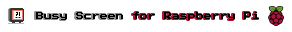
<style>
.page{position:relative;width:292px;height:32px;background:#ffffff}
.page>*{position:absolute;margin:0}
.t1{font:8px "PressStart2P-Regular";color:#000000}
</style>
<div class="page">
<p class="t1" style="left:36px;top:12px;width:87px;height:8px">Busy Screen</p>
<p class="t1" style="left:133px;top:12px;width:126px;height:8px">for Raspberry Pi</p>
</div>
